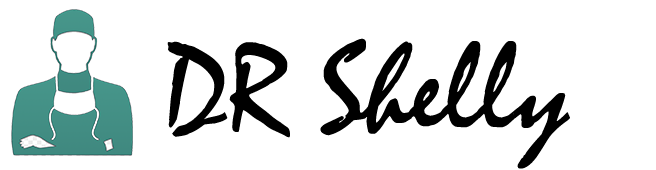
<style>
.page{position:relative;width:656px;height:170px;background:#ffffff}
.page>*{position:absolute;margin:0}
.t1{font:130px "Mistral";color:#000000}
</style>
<div class="page">
<p class="t1" style="left:167px;top:38px;width:403px;height:131px">DR Shelly</p>
</div>
